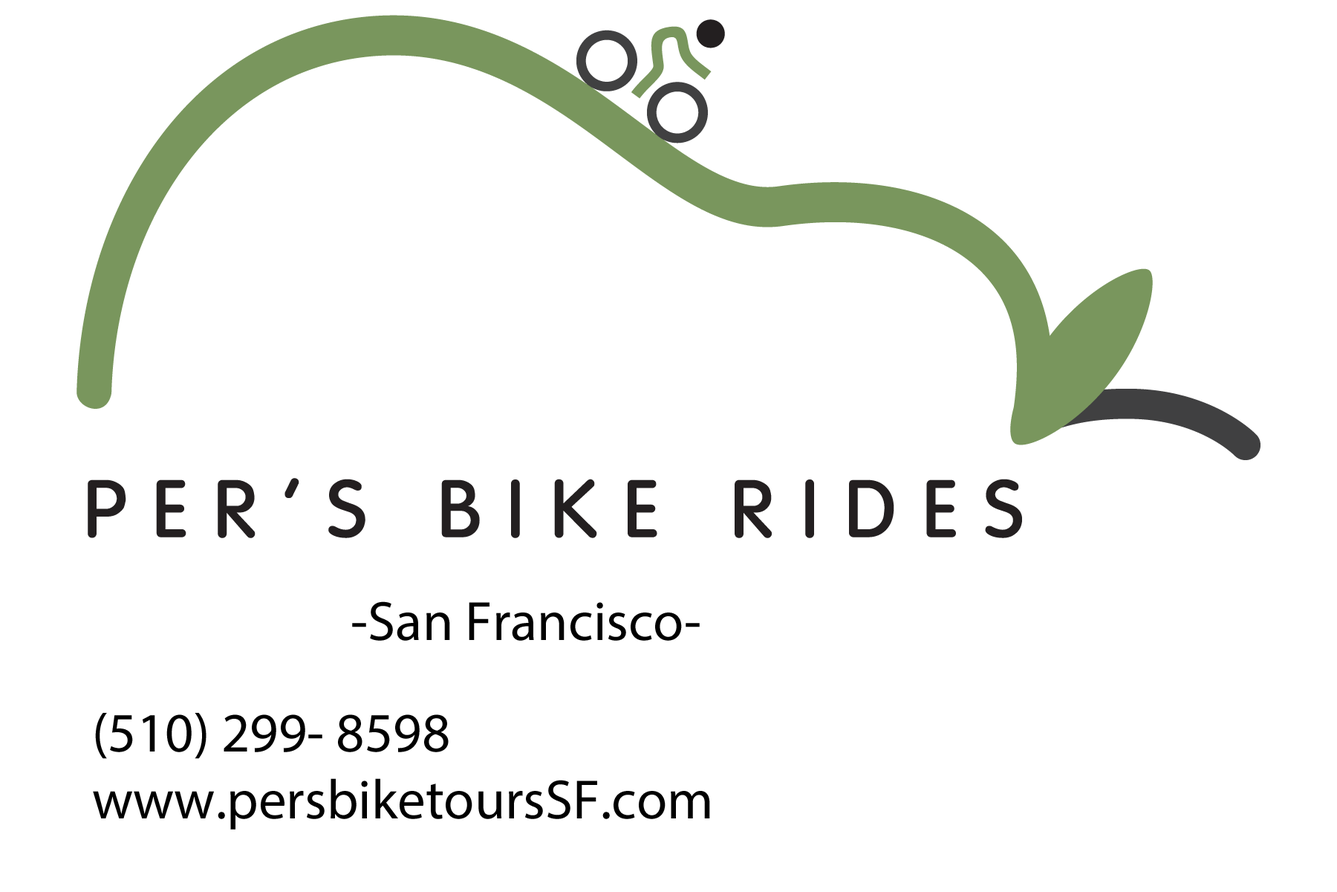
<style>
.page{position:relative;width:1337px;height:892px;background:#ffffff}
.page>*{position:absolute;margin:0}
.t1{font:55.7px "MyriadPro-Regular";color:#000000}
</style>
<div class="page">
<p class="t1" style="left:352px;top:601px;width:348px;height:39px">-San Francisco-</p>
<p class="t1" style="left:93px;top:713px;width:617px;height:116px">(510) 299- 8598<br>www.persbiketoursSF.com</p>
</div>
